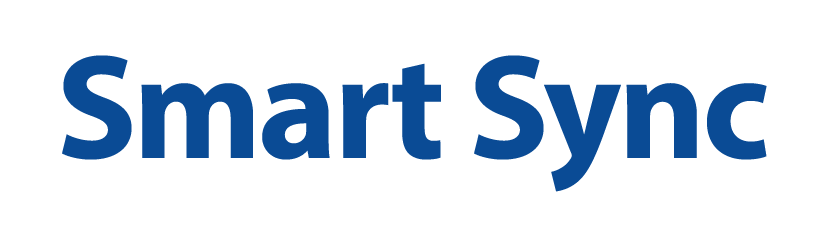
<style>
.page{position:relative;width:836px;height:231px;background:#ffffff}
.page>*{position:absolute;margin:0}
.t1{font:150px "MyriadPro-Bold";letter-spacing:-0.025em;color:#0a4b96}
</style>
<div class="page">
<p class="t1" style="left:62px;top:55px;width:705px;height:137px">Smart Sync</p>
</div>
